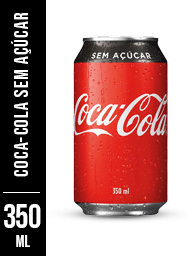
<style>
.page{position:relative;width:192px;height:256px;background:#ffffff}
.page>*{position:absolute;margin:0}
.t1{font:20px "BebasNeueSemiRounded";letter-spacing:0.05em;color:#ffffff}
.t2{font:33.4px "BebasNeue-Regular";letter-spacing:-0.03em;color:#ffffff}
.t3{font:16.1px "BebasNeue-Regular";letter-spacing:0.01em;color:#ffffff}
</style>
<div class="page">
<p class="t1" style="left:11px;top:13px;width:20px;height:164px;rotate:-90deg">coca-cola sem açúcar</p>
<p class="t2" style="left:4px;top:204px;width:37px;height:24px">350</p>
<p class="t3" style="left:16px;top:235px;width:14px;height:12px">ml</p>
</div>
